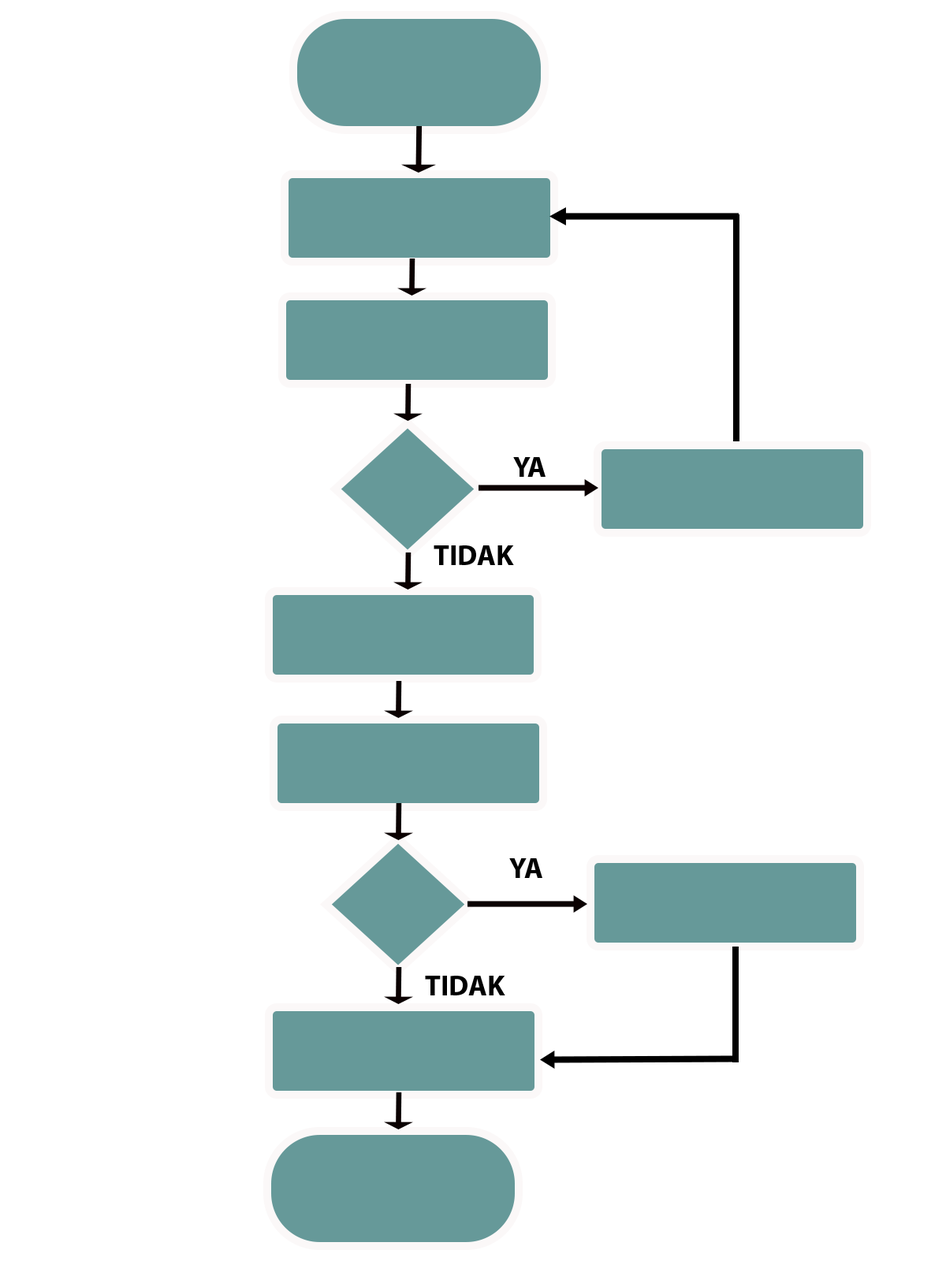
<style>
.page{position:relative;width:946px;height:1261px;background:#ffffff}
.page>*{position:absolute;margin:0}
.t1{font:28.7px "MyriadPro-Bold";color:#000000}
</style>
<div class="page">
<p class="t1" style="left:513px;top:457px;width:32px;height:20px">YA</p>
<p class="t1" style="left:433px;top:545px;width:81px;height:20px">TIDAK</p>
<p class="t1" style="left:509px;top:858px;width:33px;height:20px">YA</p>
<p class="t1" style="left:425px;top:976px;width:80px;height:19px">TIDAK</p>
</div>
